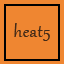
<style>
.page{position:relative;width:64px;height:64px;background:#ef8631}
.page>*{position:absolute;margin:0}
.t1{font:20.8px "Gabriola";letter-spacing:0.025em;color:#432a17}
</style>
<div class="page">
<p class="t1" style="left:14px;top:23px;width:36px;height:18px">heat5</p>
</div>
